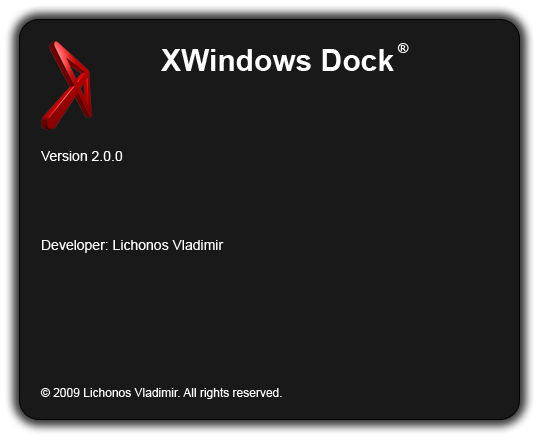
<style>
.page{position:relative;width:540px;height:440px;background:#191919}
.page>*{position:absolute;margin:0}
.t1{font:30px "Arial-BoldMT";color:#ffffff}
.t2{font:14px "Arial-BoldMT";color:#ffffff}
.t3{font:14px "ArialMT";color:#ffffff}
.t4{font:12px "ArialMT";color:#ffffff}
</style>
<div class="page">
<p class="t1" style="left:161px;top:49px;width:233px;height:22px">XWindows Dock</p>
<p class="t2" style="left:397px;top:43px;width:12px;height:10px">®</p>
<p class="t3" style="left:41px;top:151px;width:82px;height:10px">Version 2.0.0</p>
<p class="t3" style="left:42px;top:240px;width:182px;height:13px">Developer: Lichonos Vladimir</p>
<p class="t4" style="left:40px;top:388px;width:242px;height:11px">© 2009 Lichonos Vladimir. All rights reserved.</p>
</div>
